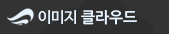
<style>
.page{position:relative;width:169px;height:34px;background:#333333}
.page>*{position:absolute;margin:0}
.t1{font:15px "NanumGothicOTFBold";color:#e7f4ff}
.t2{font:15px "NanumBarunGothicOTF";color:#e7f4ff}
</style>
<div class="page">
<p class="t1" style="left:38px;top:10px;width:99px;height:15px"><span class="t2">이미지 </span>클라우드</p>
</div>
